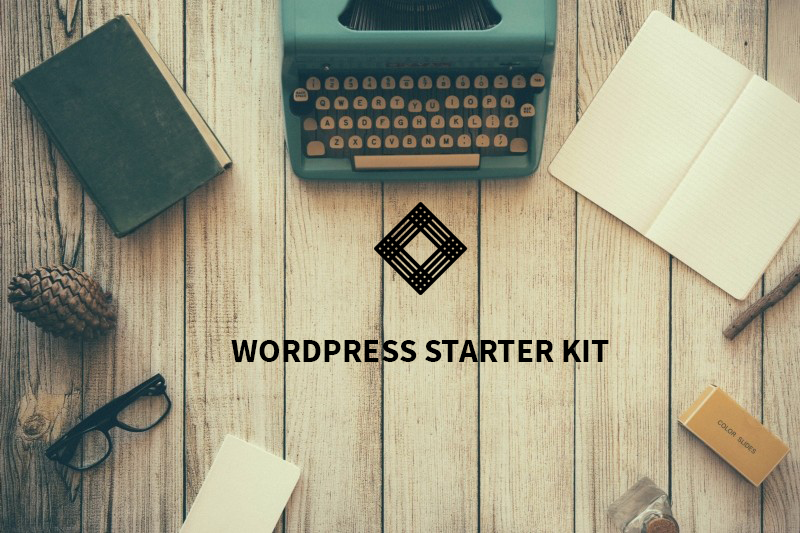
<style>
.page{position:relative;width:800px;height:533px}
.page>*{position:absolute;margin:0}
.t1{font:33.2px "SourceSansPro-Bold";color:#000000}
</style>
<div class="page">
<p class="t1" style="left:231px;top:340px;width:378px;height:22px">WORDPRESS STARTER KIT</p>
</div>
